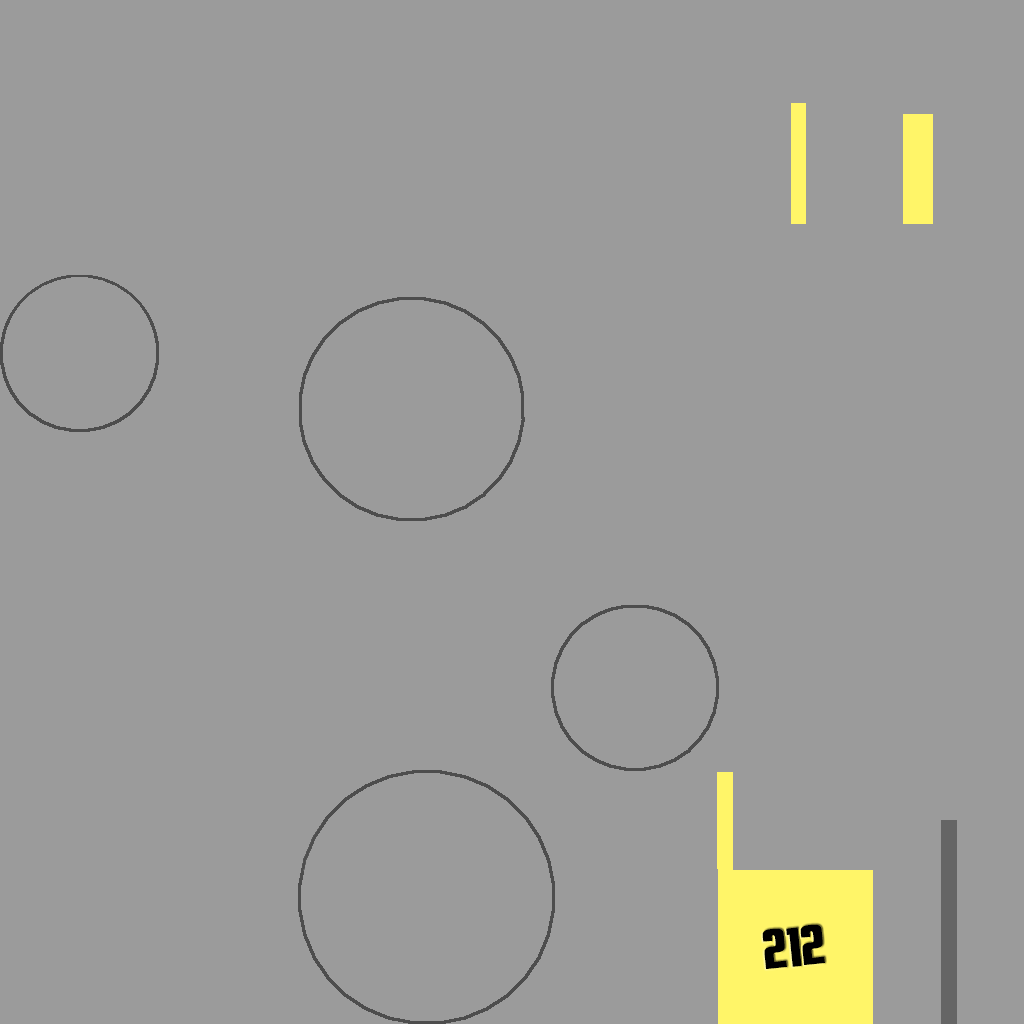
<style>
.page{position:relative;width:1024px;height:1024px;background:#9b9b9b}
.page>*{position:absolute;margin:0}
.t1{font:55px "Overseer";color:#000000;font-weight:bold}
</style>
<div class="page">
<p class="t1" style="left:762px;top:924px;width:63px;height:45px;rotate:-6deg">212</p>
</div>
